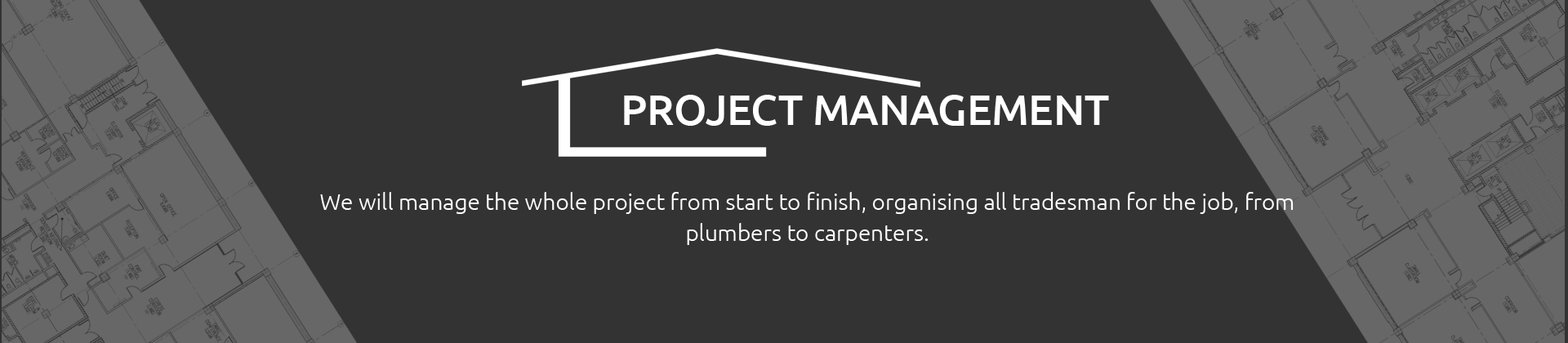
<style>
.page{position:relative;width:1568px;height:343px;background:#333333}
.page>*{position:absolute;margin:0}
.t1{font:42.1px "Ubuntu-Medium";color:#ffffff;text-transform:uppercase}
.t2{font:22.9px/31px "Ubuntu-Light";color:#ffffff}
</style>
<div class="page">
<p class="t1" style="left:624px;top:95px;width:485px;height:31px">Project Management</p>
<p class="t2" style="left:320px;top:192px;width:974px;height:53px;text-align:center">We will manage the whole project from start to finish, organising all tradesman for the job, from plumbers to carpenters.</p>
</div>
